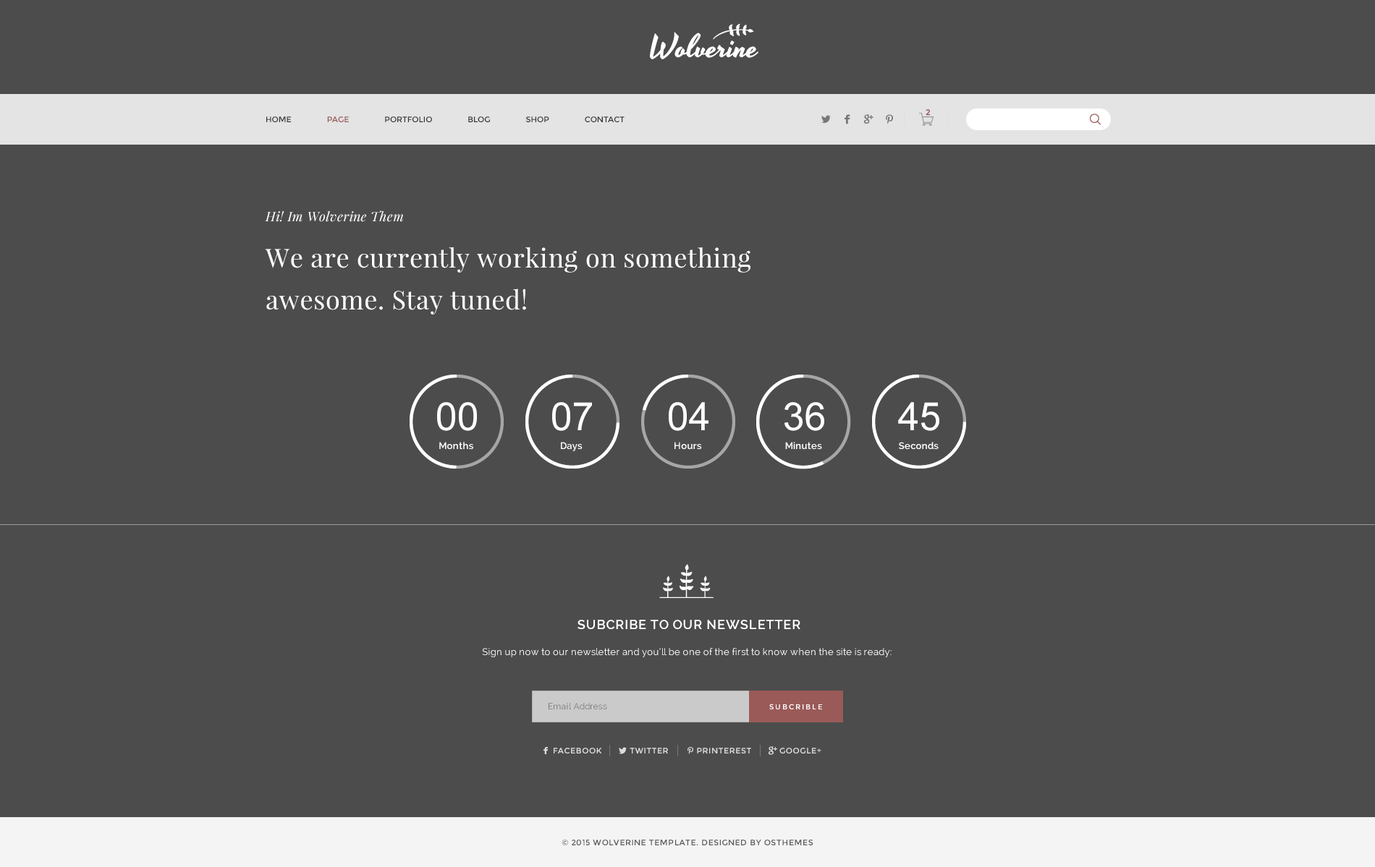
<style>
.page{position:relative;width:1375px;height:867px;background:#4c4c4c}
.page>*{position:absolute;margin:0}
.t1{font:8px "Montserrat-Regular";color:#9a5a58;font-weight:bold}
.t2{font:8px "Montserrat-Regular";color:#333333}
.t3{font:8px "Montserrat-Regular";color:#9b5a57}
.t4{font:13px "PlayfairDisplay-Italic";letter-spacing:0.02em;color:#ffffff}
.t5{font:26px/41.7px "PlayfairDisplay-Regular";letter-spacing:0.02em;color:#ffffff}
.t6{font:39.1px "ArialMT";color:#ffffff}
.t7{font:9.4px "Raleway-SemiBold";letter-spacing:0.02em;color:#ffffff}
.t8{font:13px "Raleway-SemiBold";letter-spacing:0.05em;color:#ffffff}
.t9{font:9.4px "Raleway";letter-spacing:0.02em;color:#ffffff}
.t10{font:8.7px "Raleway";letter-spacing:0.02em;color:#777777}
.t11{font:7.2px "Montserrat-Regular";letter-spacing:0.2em;color:#ffffff}
.t12{font:8px "Montserrat-Regular";letter-spacing:0.05em;color:#dddddd}
.t13{font:8px "Montserrat-Regular";letter-spacing:0.05em;color:#555555}
</style>
<div class="page">
<p class="t1" style="left:925px;top:109px;width:5px;height:7px">2</p>
<p class="t2" style="left:266px;top:116px;width:358px;height:6px">HOME      <span class="t3">PAGE</span>      PORTFOLIO      BLOG      SHOP      CONTACT</p>
<p class="t4" style="left:265px;top:211px;width:138px;height:11px">Hi! Im Wolverine Them</p>
<p class="t5" style="left:265px;top:247px;width:485px;height:68px">We are currently working on something awesome. Stay tuned!</p>
<p class="t6" style="left:437px;top:402px;width:40px;height:29px">00</p>
<p class="t6" style="left:552px;top:402px;width:40px;height:29px">07</p>
<p class="t6" style="left:669px;top:402px;width:39px;height:29px">04</p>
<p class="t6" style="left:784px;top:402px;width:40px;height:29px">36</p>
<p class="t6" style="left:898px;top:402px;width:41px;height:29px">45</p>
<p class="t7" style="left:439px;top:442px;width:34px;height:8px">Months</p>
<p class="t7" style="left:561px;top:442px;width:21px;height:9px">Days</p>
<p class="t7" style="left:674px;top:442px;width:28px;height:8px">Hours</p>
<p class="t7" style="left:785px;top:442px;width:37px;height:8px">Minutes</p>
<p class="t7" style="left:899px;top:442px;width:39px;height:8px">Seconds</p>
<p class="t8" style="left:577px;top:620px;width:223px;height:9px">SUBCRIBE TO OUR NEWSLETTER</p>
<p class="t9" style="left:482px;top:648px;width:409px;height:10px">Sign up now to our newsletter and you’ll be one of the first to know when the site is ready:</p>
<p class="t10" style="left:548px;top:703px;width:59px;height:7px">Email Address</p>
<p class="t11" style="left:769px;top:704px;width:53px;height:6px">SUBCRIBLE</p>
<p class="t12" style="left:553px;top:748px;width:268px;height:6px">FACEBOOK             TWITTER             PRINTEREST             GOOGLE+</p>
<p class="t13" style="left:561px;top:840px;width:252px;height:6px">© 2015 WOLVERINE TEMPLATE. DESIGNED BY OSTHEMES</p>
</div>
